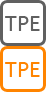
<style>
.page{position:relative;width:46px;height:92px;background:#ffffff}
.page>*{position:absolute;margin:0}
.t1{font:24px "Calibri";color:#606060}
.t2{font:24px "Calibri";color:#ff8400}
</style>
<div class="page">
<p class="t1" style="left:5px;top:16px;width:35px;height:15px">TPE</p>
<p class="t2" style="left:5px;top:62px;width:35px;height:15px">TPE</p>
</div>
